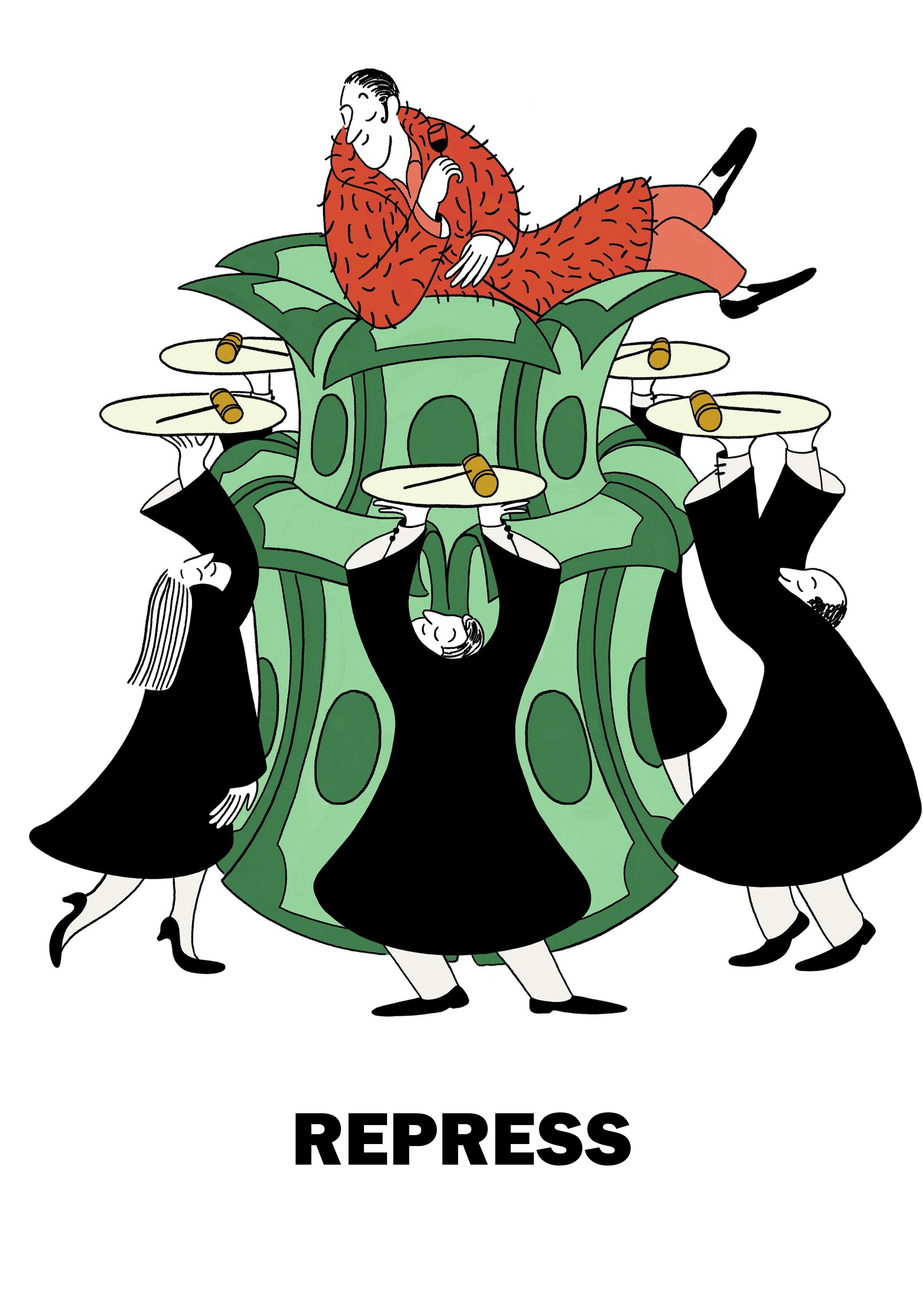
<style>
.page{position:relative;width:923px;height:1292px;background:#ffffff}
.page>*{position:absolute;margin:0}
.t1{font:76.9px "FranklinGothicURW-Hea";color:#000000}
</style>
<div class="page">
<p class="t1" style="left:295px;top:1112px;width:336px;height:54px">REPRESS</p>
</div>
